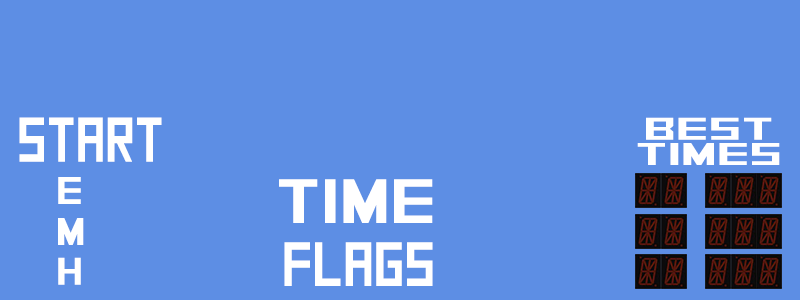
<style>
.page{position:relative;width:800px;height:300px;background:#5d8ee4}
.page>*{position:absolute;margin:0}
.t1{font:63.3px "SquareFont";color:#ffffff;scale:0.8 1}
.t2{font:31.6px/25px "SquareFont";color:#ffffff;scale:1.78 1}
.t3{font:38.4px "SquareFont";color:#ffffff;scale:1.21 1}
.t4{font:62.3px "SquareFont";color:#ffffff;scale:1.27 1}
.t5{font:62.3px "SquareFont";color:#ffffff;scale:0.85 1}
</style>
<div class="page">
<p class="t1" style="left:19px;top:117px;width:143px;height:45px">Start</p>
<p class="t2" style="left:637px;top:117px;width:143px;height:48px;text-align:center">BEst<br>Times</p>
<p class="t3" style="left:58px;top:177px;width:23px;height:27px">E</p>
<p class="t4" style="left:279px;top:179px;width:154px;height:44px">Time</p>
<p class="t3" style="left:58px;top:218px;width:26px;height:27px">M</p>
<p class="t5" style="left:284px;top:242px;width:149px;height:44px">FLAGS</p>
<p class="t3" style="left:58px;top:257px;width:23px;height:28px">H</p>
</div>
